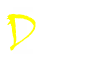
<style>
.page{position:relative;width:100px;height:60px;background:#ffffff}
.page>*{position:absolute;margin:0}
.t1{font:39.6px "VinerHandITC";color:#ffff00;scale:1.09 1}
</style>
<div class="page">
<p class="t1" style="left:6px;top:13px;width:30px;height:38px;rotate:-14deg">D</p>
</div>
